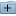
<style>
.page{position:relative;width:16px;height:16px}
.page>*{position:absolute;margin:0}
.t1{font:13.3px "TimesNewRomanPS-BoldMT";color:#000000}
</style>
<div class="page">
<p class="t1" style="left:4px;top:4px;width:7px;height:8px">+</p>
</div>
